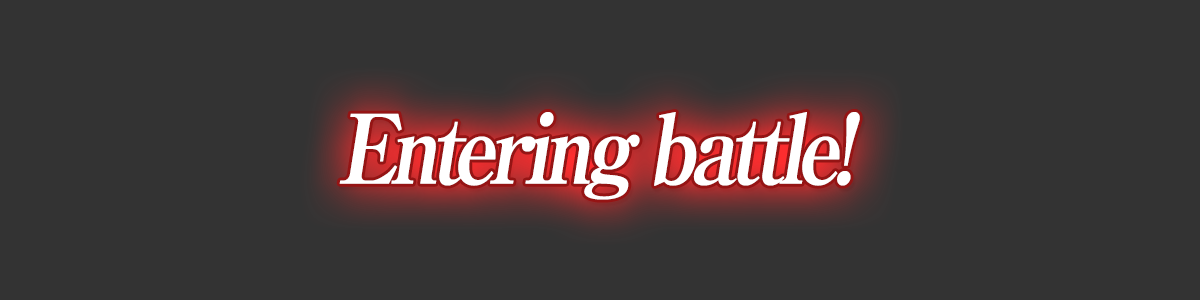
<style>
.page{position:relative;width:1200px;height:300px;background:#333333}
.page>*{position:absolute;margin:0}
.t1{font:96px "RyuminPro-ExBold";letter-spacing:-0.08em;color:#ffffff;font-style:italic;scale:0.9 1}
</style>
<div class="page">
<p class="t1" style="left:339px;top:112px;width:521px;height:88px">Entering battle!</p>
</div>
